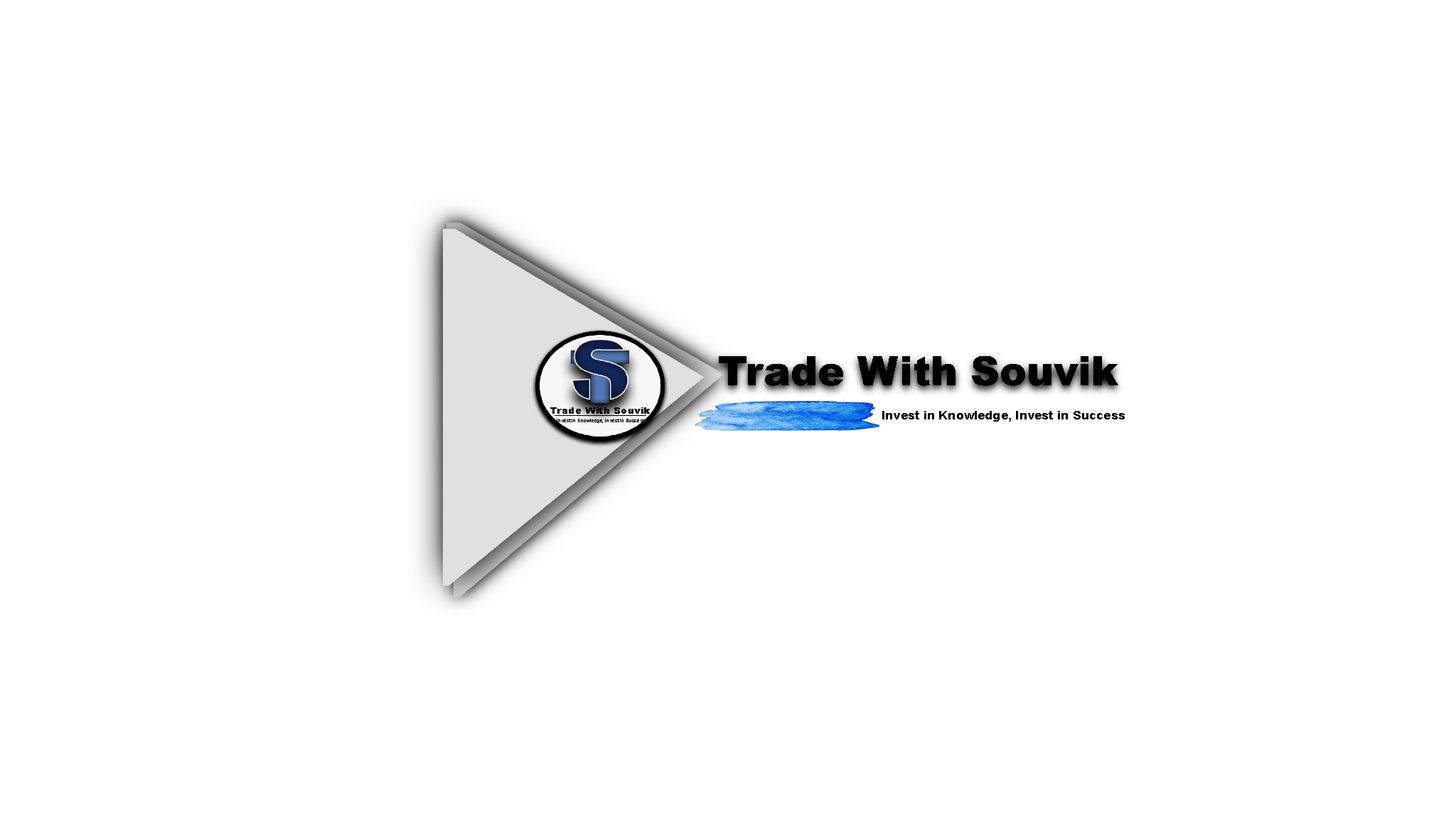
<style>
.page{position:relative;width:1456px;height:819px;background:#ffffff}
.page>*{position:absolute;margin:0}
.t1{font:40.3px "Arial-Black";color:#000000}
.t2{font:8.5px "Arial-Black";color:#000000;scale:1.18 1}
.t3{font:11.6px "Arial-BoldMT";color:#000000;scale:1.11 1}
.t4{font:4.1px "Arial-BoldMT";color:#000000;scale:1.15 1}
</style>
<div class="page">
<p class="t1" style="left:719px;top:356px;width:399px;height:30px">Trade With Souvik</p>
<p class="t2" style="left:550px;top:407px;width:100px;height:7px">Trade With Souvik</p>
<p class="t3" style="left:882px;top:411px;width:243px;height:11px">Invest in Knowledge, Invest in Success</p>
<p class="t4" style="left:557px;top:419px;width:88px;height:4px">Invest in Knowledge, Invest in Success</p>
</div>
